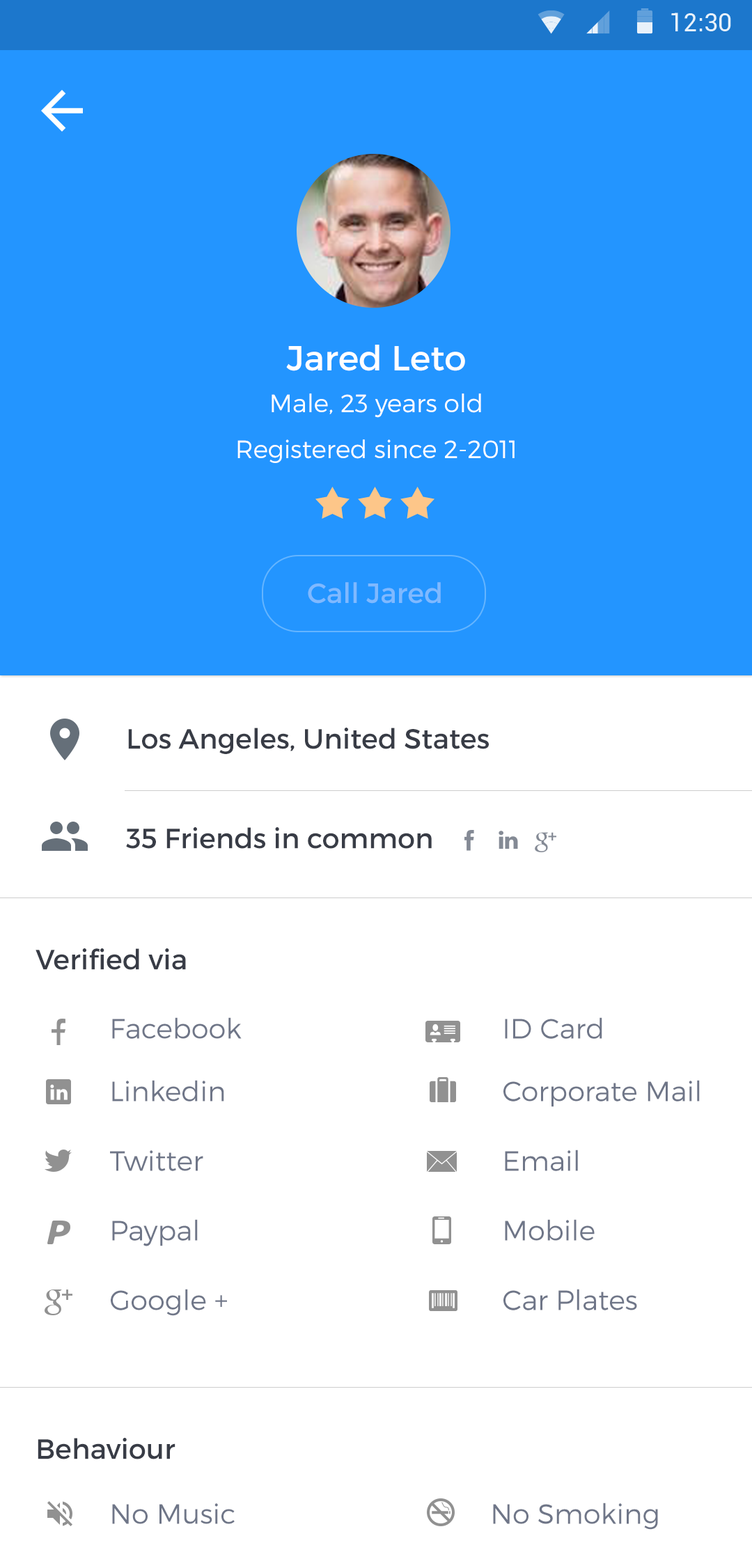
<style>
.page{position:relative;width:752px;height:1568px;background:#ffffff}
.page>*{position:absolute;margin:0}
.t1{font:34.8px "Montserrat-Regular";color:#ffffff}
.t2{font:25.1px "Montserrat-Light";color:#ffffff}
.t3{font:27.9px "Montserrat-Regular";color:#7fb9ff}
.t4{font:27.9px "Montserrat-Regular";color:#383c46}
.t5{font:27.9px "Montserrat-Light";color:#6f7688}
</style>
<div class="page">
<p class="t1" style="left:286px;top:345px;width:179px;height:26px">Jared Leto</p>
<p class="t2" style="left:272px;top:393px;width:209px;height:25px">Male, 23 years old</p>
<p class="t2" style="left:237px;top:439px;width:278px;height:24px">Registered since 2-2011</p>
<p class="t3" style="left:308px;top:582px;width:133px;height:22px">Call Jared</p>
<p class="t4" style="left:128px;top:728px;width:361px;height:26px">Los Angeles, United States</p>
<p class="t4" style="left:126px;top:827px;width:306px;height:22px">35 Friends in common</p>
<p class="t4" style="left:36px;top:948px;width:150px;height:22px">Verified via</p>
<p class="t5" style="left:112px;top:1017px;width:130px;height:22px">Facebook</p>
<p class="t5" style="left:505px;top:1017px;width:97px;height:22px">ID Card</p>
<p class="t5" style="left:112px;top:1080px;width:112px;height:21px">Linkedin</p>
<p class="t5" style="left:503px;top:1080px;width:197px;height:27px">Corporate Mail</p>
<p class="t5" style="left:110px;top:1150px;width:93px;height:21px">Twitter</p>
<p class="t5" style="left:505px;top:1150px;width:73px;height:21px">Email</p>
<p class="t5" style="left:112px;top:1219px;width:86px;height:27px">Paypal</p>
<p class="t5" style="left:505px;top:1219px;width:90px;height:22px">Mobile</p>
<p class="t5" style="left:111px;top:1289px;width:116px;height:27px">Google +</p>
<p class="t5" style="left:503px;top:1289px;width:134px;height:21px">Car Plates</p>
<p class="t4" style="left:38px;top:1438px;width:137px;height:21px">Behaviour</p>
<p class="t5" style="left:112px;top:1503px;width:123px;height:21px">No Music</p>
<p class="t5" style="left:493px;top:1503px;width:165px;height:27px">No Smoking</p>
</div>
